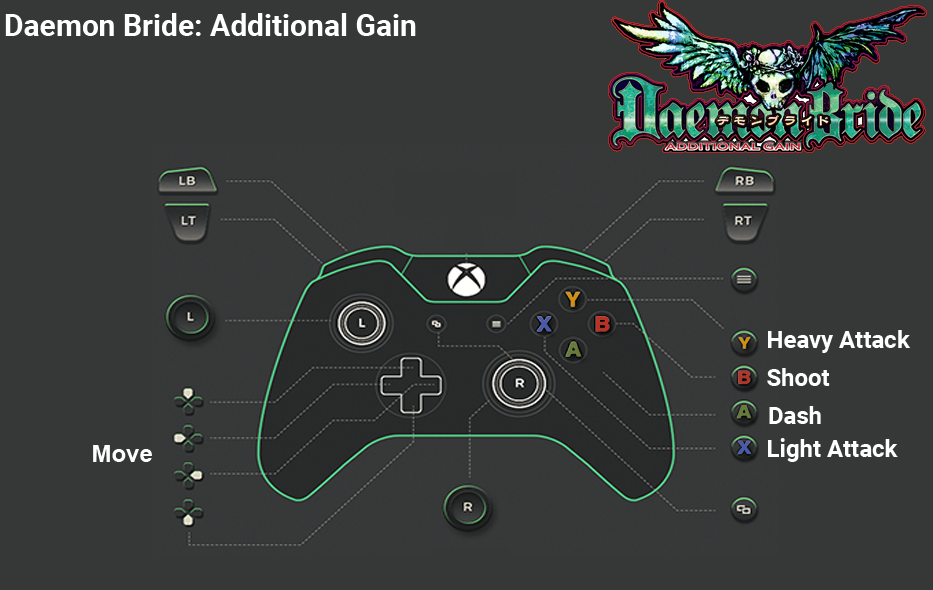
<style>
.page{position:relative;width:933px;height:590px;background:#363838}
.page>*{position:absolute;margin:0}
.t1{font:30px "Roboto-Bold";color:#ffffff}
.t2{font:24px "Roboto-Bold";color:#ffffff}
.t3{font:24px "Arial-BoldMT";color:#fefefe}
</style>
<div class="page">
<p class="t1" style="left:5px;top:13px;width:411px;height:23px">Daemon Bride: Additional Gain</p>
<p class="t2" style="left:768px;top:330px;width:143px;height:23px">Heavy Attack</p>
<p class="t2" style="left:767px;top:368px;width:63px;height:18px">Shoot</p>
<p class="t2" style="left:769px;top:406px;width:52px;height:18px">Dash</p>
<p class="t2" style="left:768px;top:438px;width:130px;height:24px">Light Attack</p>
<p class="t3" style="left:93px;top:445px;width:59px;height:17px">Move</p>
</div>
